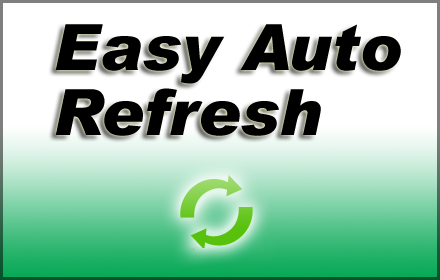
<style>
.page{position:relative;width:440px;height:280px;background:#ffffff}
.page>*{position:absolute;margin:0}
.t1{font:64px/13px "Arial-BlackItalic";color:#000000}
</style>
<div class="page">
<p class="t1" style="left:55px;top:24px;width:346px;height:112px">Easy Auto<br><br><br><br>       <br>Refresh</p>
</div>
